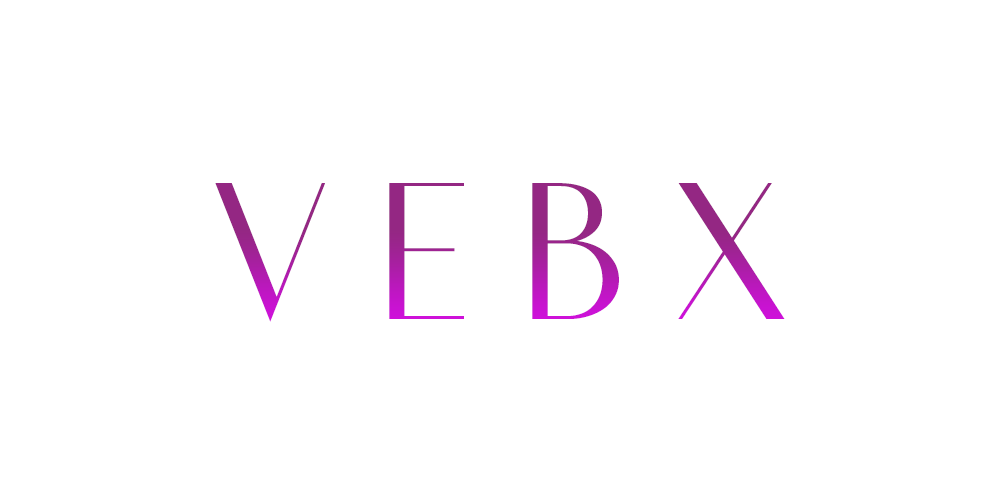
<style>
.page{position:relative;width:1000px;height:500px;background:#ffffff}
.page>*{position:absolute;margin:0}
.t1{font:200px "Vanitas-Bold"}
</style>
<div class="page">
<p class="t1" style="left:215px;top:183px;width:570px;height:139px">V E B X</p>
</div>
